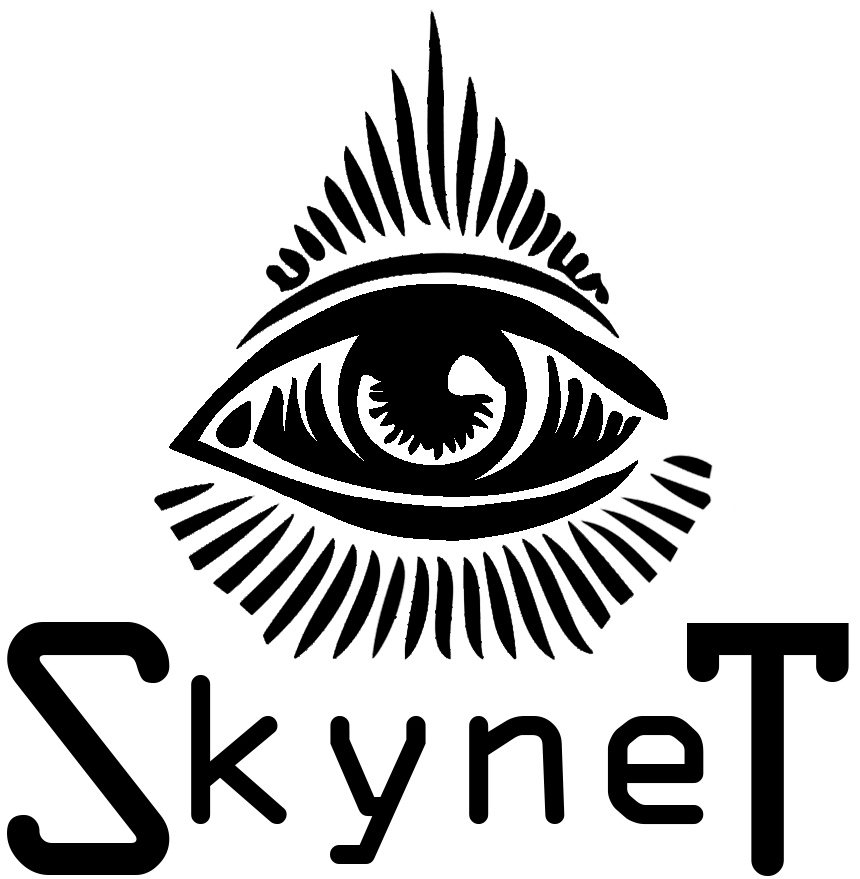
<style>
.page{position:relative;width:860px;height:879px;background:#ffffff}
.page>*{position:absolute;margin:0}
.t1{font:390.1px "OCRAExtended";color:#000000}
.t2{font:230px "OCRAExtended";color:#000000}
</style>
<div class="page">
<p class="t1" style="left:7px;top:622px;width:163px;height:253px">S</p>
<p class="t1" style="left:687px;top:623px;width:162px;height:253px">T</p>
<p class="t2" style="left:191px;top:675px;width:513px;height:189px">kyne</p>
</div>
